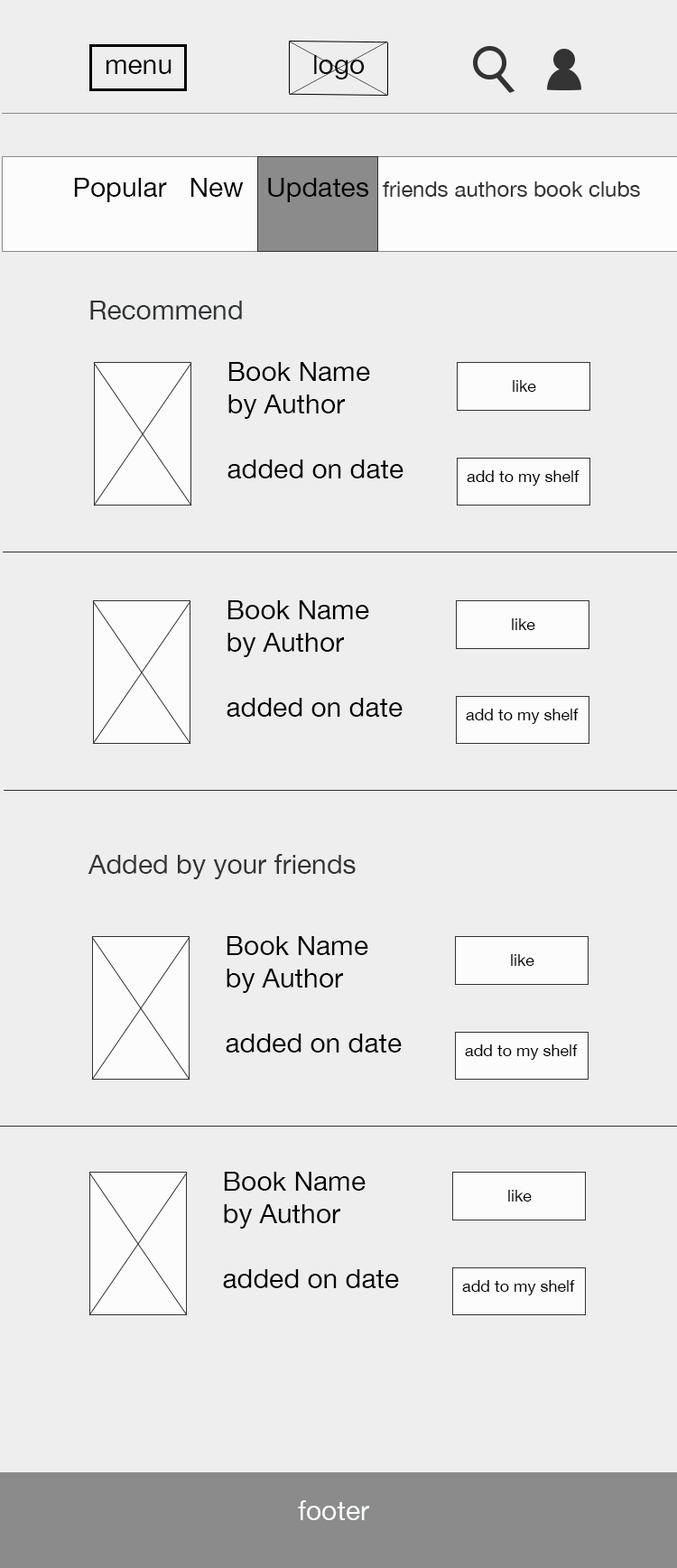
<style>
.page{position:relative;width:677px;height:1568px;background:#eeeeee}
.page>*{position:absolute;margin:0}
.t1{font:27.1px "HelveticaNeue";color:#050505}
.t2{font:21.7px "HelveticaNeue";color:#313436}
.t3{font:27.1px "HelveticaNeue";color:#030303}
.t4{font:27.1px "HelveticaNeue";color:#313436}
.t5{font:16.2px "HelveticaNeue";color:#030303}
.t6{font:27.1px "HelveticaNeue";color:#f9fcfe}
</style>
<div class="page">
<p class="t1" style="left:106px;top:60px;width:66px;height:14px">menu</p>
<p class="t1" style="left:314px;top:55px;width:51px;height:24px">logo</p>
<p class="t2" style="left:74px;top:178px;width:566px;height:24px"><span class="t3">Popular   New   Updates </span> friends authors book clubs</p>
<p class="t4" style="left:90px;top:301px;width:152px;height:19px">Recommend</p>
<p class="t3" style="left:227px;top:362px;width:177px;height:116px">Book Name<br>by Author<br><br>added on date</p>
<p class="t5" style="left:513px;top:380px;width:23px;height:12px">like</p>
<p class="t5" style="left:467px;top:470px;width:113px;height:16px">add to my shelf</p>
<p class="t3" style="left:227px;top:600px;width:176px;height:117px">Book Name<br>by Author<br><br>added on date</p>
<p class="t5" style="left:512px;top:618px;width:23px;height:12px">like</p>
<p class="t5" style="left:466px;top:709px;width:113px;height:15px">add to my shelf</p>
<p class="t4" style="left:88px;top:854px;width:268px;height:25px">Added by your friends</p>
<p class="t3" style="left:226px;top:936px;width:176px;height:117px">Book Name<br>by Author<br><br>added on date</p>
<p class="t5" style="left:511px;top:954px;width:23px;height:12px">like</p>
<p class="t5" style="left:465px;top:1044px;width:113px;height:16px">add to my shelf</p>
<p class="t3" style="left:223px;top:1172px;width:176px;height:116px">Book Name<br>by Author<br><br>added on date</p>
<p class="t5" style="left:508px;top:1190px;width:24px;height:12px">like</p>
<p class="t5" style="left:462px;top:1280px;width:113px;height:15px">add to my shelf</p>
<p class="t6" style="left:298px;top:1500px;width:71px;height:20px">footer</p>
</div>
